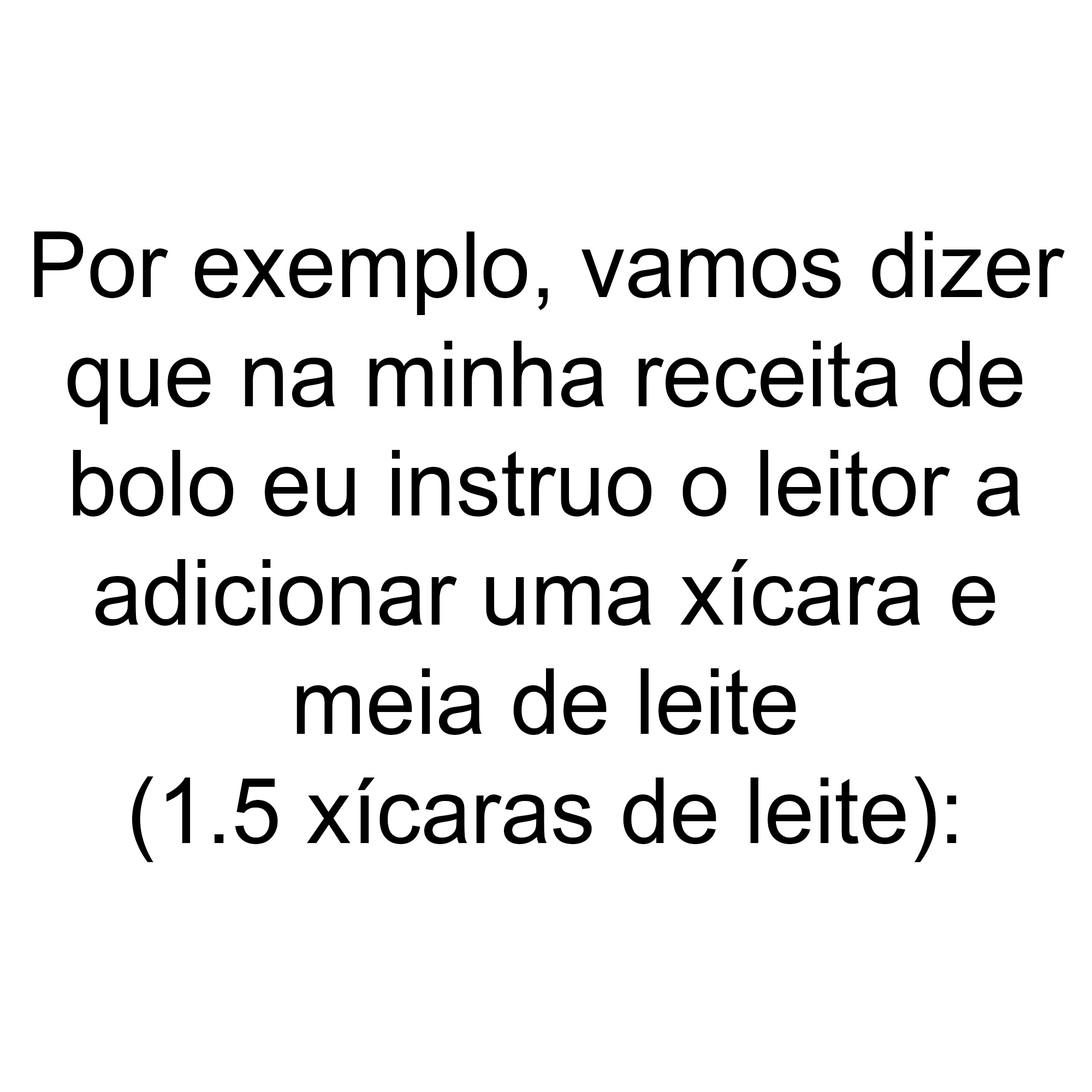
<style>
.page{position:relative;width:1092px;height:1092px;background:#ffffff}
.page>*{position:absolute;margin:0}
.t1{font:91px "ArialMT";color:#000000}
</style>
<div class="page">
<p class="t1" style="left:34px;top:232px;width:1031px;height:630px;text-align:center">Por exemplo, vamos dizer<br>que na minha receita de<br>bolo eu instruo o leitor a<br>adicionar uma xícara e<br>meia de leite<br>(1.5 xícaras de leite):</p>
</div>
